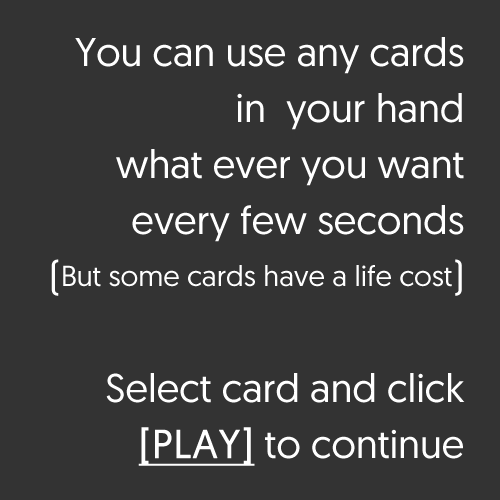
<style>
.page{position:relative;width:500px;height:500px;background:#333333}
.page>*{position:absolute;margin:0}
.t1{font:40px/56px "Geomanist-Regular";color:#ffffff}
.t2{font:29.1px/56px "Geomanist-Regular";color:#ffffff}
.t3{font:40px/56px "Geomanist-Regular";color:#ffffff;font-weight:bold;text-decoration:underline}
</style>
<div class="page">
<p class="t1" style="left:51px;top:37px;width:414px;height:429px;text-align:right">You can use any cards<br>in  your hand<br>what ever you want<br>every few seconds<br>(<span class="t2">But some cards have a life cost</span>)<br><br>Select card and click<br><span class="t3">[PLAY]</span> to continue</p>
</div>
